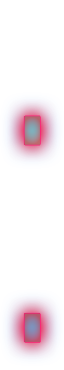
<style>
.page{position:relative;width:64px;height:370px;background:#ffffff}
.page>*{position:absolute;margin:0}
.t1{font:481.8px "AndroidClock-Regular";letter-spacing:0.025em;scale:0.76 1}
</style>
<div class="page">
<p class="t1" style="left:24px;top:116px;width:16px;height:226px">:</p>
<p class="t1" style="left:24px;top:116px;width:16px;height:226px">:</p>
</div>
